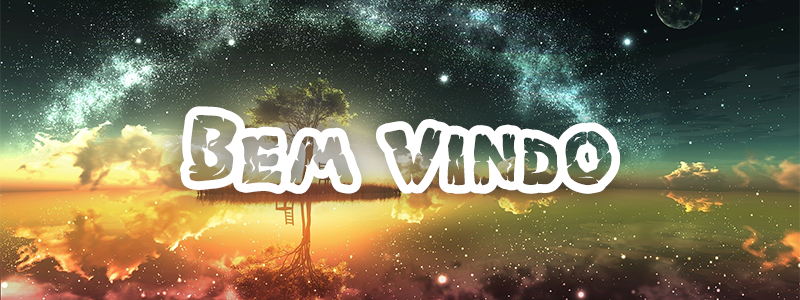
<style>
.page{position:relative;width:800px;height:300px}
.page>*{position:absolute;margin:0}
.t1{font:106.9px "Chlorinar-Regular";color:#ffffff}
</style>
<div class="page">
<p class="t1" style="left:180px;top:106px;width:440px;height:88px">Bem Vindo</p>
</div>
